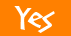
<style>
.page{position:relative;width:71px;height:36px;background:#ff8000}
.page>*{position:absolute;margin:0}
.t1{font:40px "Screwball";color:#ffffff}
</style>
<div class="page">
<p class="t1" style="left:14px;top:6px;width:41px;height:27px">Yes</p>
</div>
